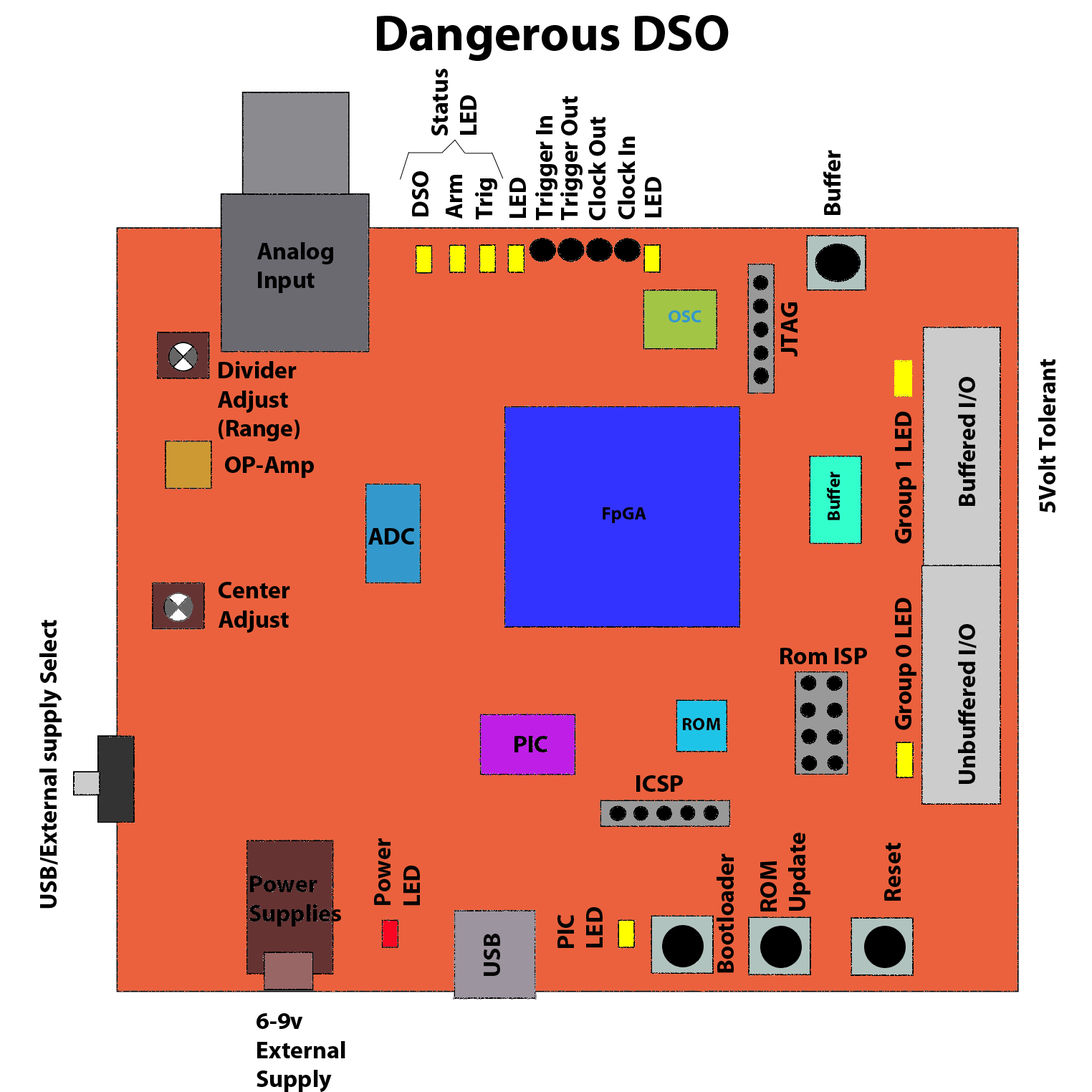
<style>
.page{position:relative;width:1092px;height:1092px;background:#ffffff}
.page>*{position:absolute;margin:0}
.t1{font:50.6px "MyriadPro-Bold";color:#000000}
.t2{font:24.3px "MyriadPro-Bold";color:#000000}
.t3{font:18.2px "MyriadPro-Bold";color:#000000}
.t4{font:24.3px "MyriadPro-Bold";color:#060606}
</style>
<div class="page">
<p class="t1" style="left:377px;top:15px;width:352px;height:46px">Dangerous DSO</p>
<p class="t2" style="left:431px;top:69px;width:45px;height:67px;rotate:-90deg">Status<br>LED</p>
<p class="t2" style="left:560px;top:96px;width:23px;height:125px;rotate:-90deg">Trigger Out</p>
<p class="t2" style="left:535px;top:116px;width:22px;height:105px;rotate:-90deg">Trigger In</p>
<p class="t2" style="left:588px;top:117px;width:17px;height:104px;rotate:-90deg">Clock Out</p>
<p class="t2" style="left:618px;top:136px;width:17px;height:83px;rotate:-90deg">Clock In</p>
<p class="t2" style="left:823px;top:150px;width:17px;height:65px;rotate:-90deg">Buffer</p>
<p class="t2" style="left:412px;top:171px;width:16px;height:45px;rotate:-90deg">DSO</p>
<p class="t2" style="left:446px;top:175px;width:16px;height:44px;rotate:-90deg">Arm</p>
<p class="t2" style="left:475px;top:178px;width:22px;height:42px;rotate:-90deg">Trig</p>
<p class="t2" style="left:509px;top:178px;width:17px;height:40px;rotate:-90deg">LED</p>
<p class="t2" style="left:257px;top:242px;width:76px;height:51px">Analog<br>Input</p>
<p class="t2" style="left:781px;top:302px;width:16px;height:55px;rotate:-90deg">JTAG</p>
<p class="t2" style="left:218px;top:361px;width:82px;height:80px">Divider<br>Adjust<br>(Range)</p>
<p class="t2" style="left:1038px;top:359px;width:17px;height:154px;rotate:-90deg">5Volt Tolerant</p>
<p class="t2" style="left:958px;top:377px;width:19px;height:129px;rotate:-90deg">Buffered I/O</p>
<p class="t2" style="left:895px;top:411px;width:21px;height:133px;rotate:-90deg">Group 1 LED</p>
<p class="t2" style="left:225px;top:456px;width:89px;height:22px">OP-Amp</p>
<p class="t3" style="left:827px;top:471px;width:13px;height:49px;rotate:-90deg">Buffer</p>
<p class="t3" style="left:603px;top:507px;width:43px;height:16px">FpGA</p>
<p class="t2" style="left:368px;top:528px;width:47px;height:17px">ADC</p>
<p class="t2" style="left:219px;top:582px;width:71px;height:51px">Center<br>Adjust</p>
<p class="t2" style="left:895px;top:598px;width:21px;height:132px;rotate:-90deg">Group 0 LED</p>
<p class="t2" style="left:39px;top:620px;width:23px;height:289px;rotate:-90deg">USB/External supply Select</p>
<p class="t2" style="left:958px;top:624px;width:19px;height:160px;rotate:-90deg">Unbuffered I/O</p>
<p class="t2" style="left:780px;top:648px;width:87px;height:16px">Rom ISP</p>
<p class="t3" style="left:683px;top:718px;width:37px;height:12px">ROM</p>
<p class="t2" style="left:636px;top:775px;width:47px;height:17px">ICSP</p>
<p class="t2" style="left:760px;top:833px;width:50px;height:78px;rotate:-90deg">ROM <br>Update</p>
<p class="t4" style="left:374px;top:838px;width:46px;height:68px;rotate:-90deg">Power <br>LED</p>
<p class="t2" style="left:884px;top:843px;width:17px;height:58px;rotate:-90deg">Reset</p>
<p class="t2" style="left:717px;top:853px;width:17px;height:120px;rotate:-90deg">Bootloader</p>
<p class="t2" style="left:249px;top:876px;width:92px;height:50px">Power <br>Supplies</p>
<p class="t4" style="left:557px;top:907px;width:46px;height:41px;rotate:-90deg">PIC<br>LED</p>
<p class="t4" style="left:484px;top:934px;width:16px;height:42px;rotate:-90deg">USB</p>
<p class="t2" style="left:257px;top:1013px;width:88px;height:79px">6-9v<br>External<br>Supply</p>
</div>
